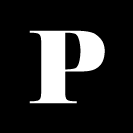
<style>
.page{position:relative;width:133px;height:133px;background:#000000}
.page>*{position:absolute;margin:0}
.t1{font:99px "Elephant-Regular";color:#ffffff;scale:0.97 1}
</style>
<div class="page">
<p class="t1" style="left:29px;top:30px;width:76px;height:74px">P</p>
</div>
